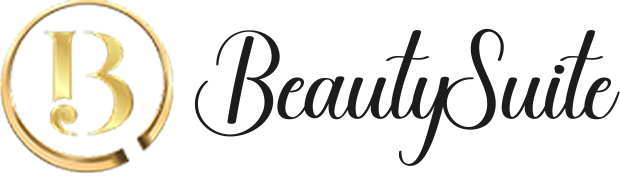
<style>
.page{position:relative;width:620px;height:176px;background:#ffffff}
.page>*{position:absolute;margin:0}
.t1{font:128px "AlwaysSmileRegular";color:#1c1c1c}
</style>
<div class="page">
<p class="t1" style="left:194px;top:28px;width:426px;height:138px">BeautySuite</p>
</div>
